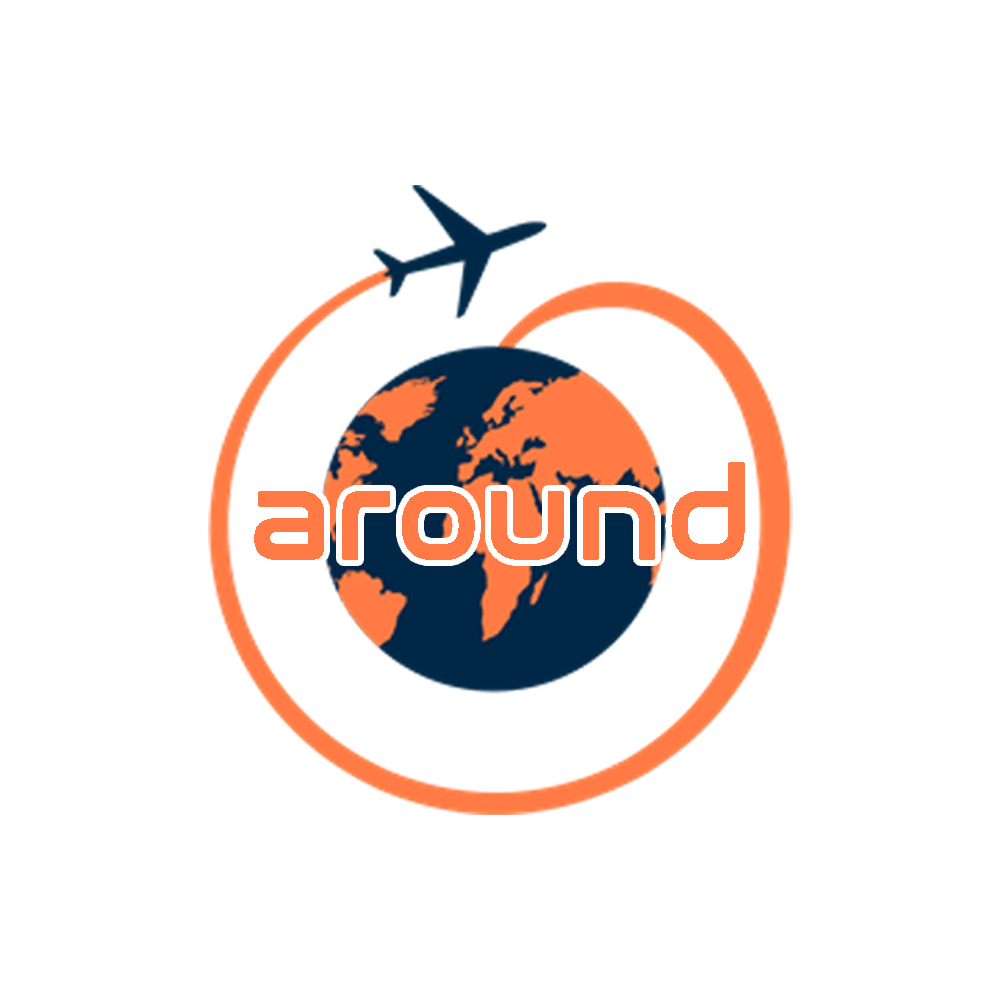
<style>
.page{position:relative;width:1000px;height:1000px;background:#ffffff}
.page>*{position:absolute;margin:0}
.t1{font:125px "NasalizationRg-Regular";color:#ff7a44;font-weight:bold}
</style>
<div class="page">
<p class="t1" style="left:254px;top:462px;width:491px;height:98px">around</p>
</div>
